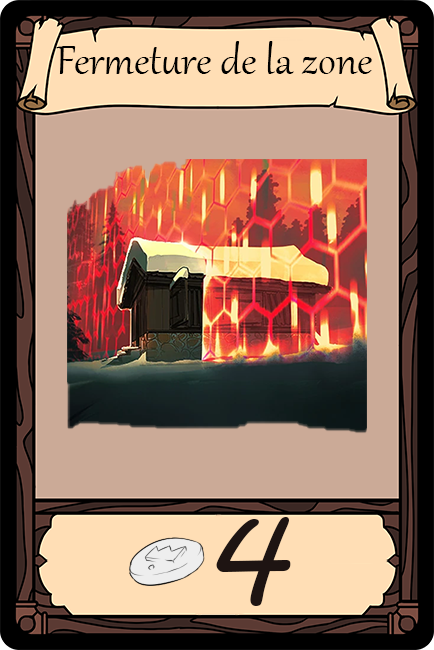
<style>
.page{position:relative;width:434px;height:650px;background:#cbaa97}
.page>*{position:absolute;margin:0}
.t1{font:50px "Gabriola";color:#000000}
.t2{font:125px "MVBoli";color:#1e1412}
</style>
<div class="page">
<p class="t1" style="left:56px;top:41px;width:316px;height:33px">Fermeture de la zone</p>
<p class="t2" style="left:216px;top:517px;width:75px;height:89px">4</p>
</div>
